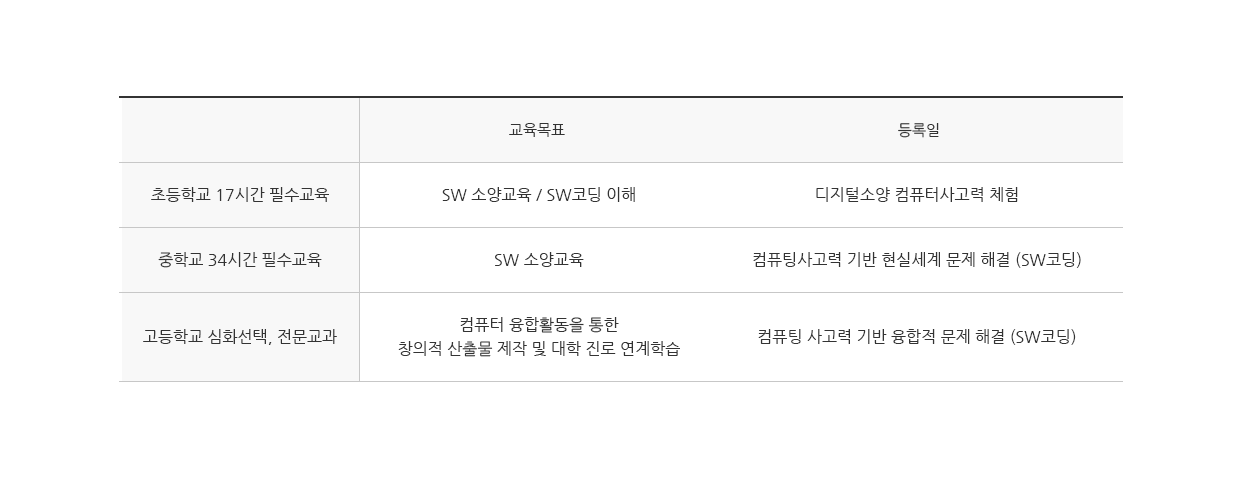
<style>
.page{position:relative;width:1249px;height:491px;background:#ffffff}
.page>*{position:absolute;margin:0}
.t1{font:15px "NanumGothic";color:#333333}
.t2{font:16px/65px "NanumGothic";color:#333333}
.t3{font:16px/77px "NanumGothic";color:#333333}
.t4{font:16px/24px "NanumGothic";color:#333333}
</style>
<div class="page">
<p class="t1" style="left:509px;top:123px;width:56px;height:14px">교육목표</p>
<p class="t1" style="left:898px;top:123px;width:41px;height:15px">등록일</p>
<p class="t2" style="left:143px;top:187px;width:194px;height:158px;text-align:center">초등학교 17시간 필수교육<br>중학교 34시간 필수교육<span class="t3"><br>고등학교 심화선택, 전문교과</span></p>
<p class="t2" style="left:398px;top:187px;width:282px;height:170px;text-align:center">SW 소양교육 / SW코딩 이해<br>SW 소양교육<br>컴퓨터 융합활동을 통한<span class="t4"><br>창의적 산출물 제작 및 대학 진로 연계학습</span></p>
<p class="t2" style="left:753px;top:187px;width:328px;height:158px;text-align:center">디지털소양 컴퓨터사고력 체험<br>컴퓨팅사고력 기반 현실세계 문제 해결 (SW코딩)<span class="t3"><br>컴퓨팅 사고력 기반 융합적 문제 해결 (SW코딩)</span></p>
</div>
